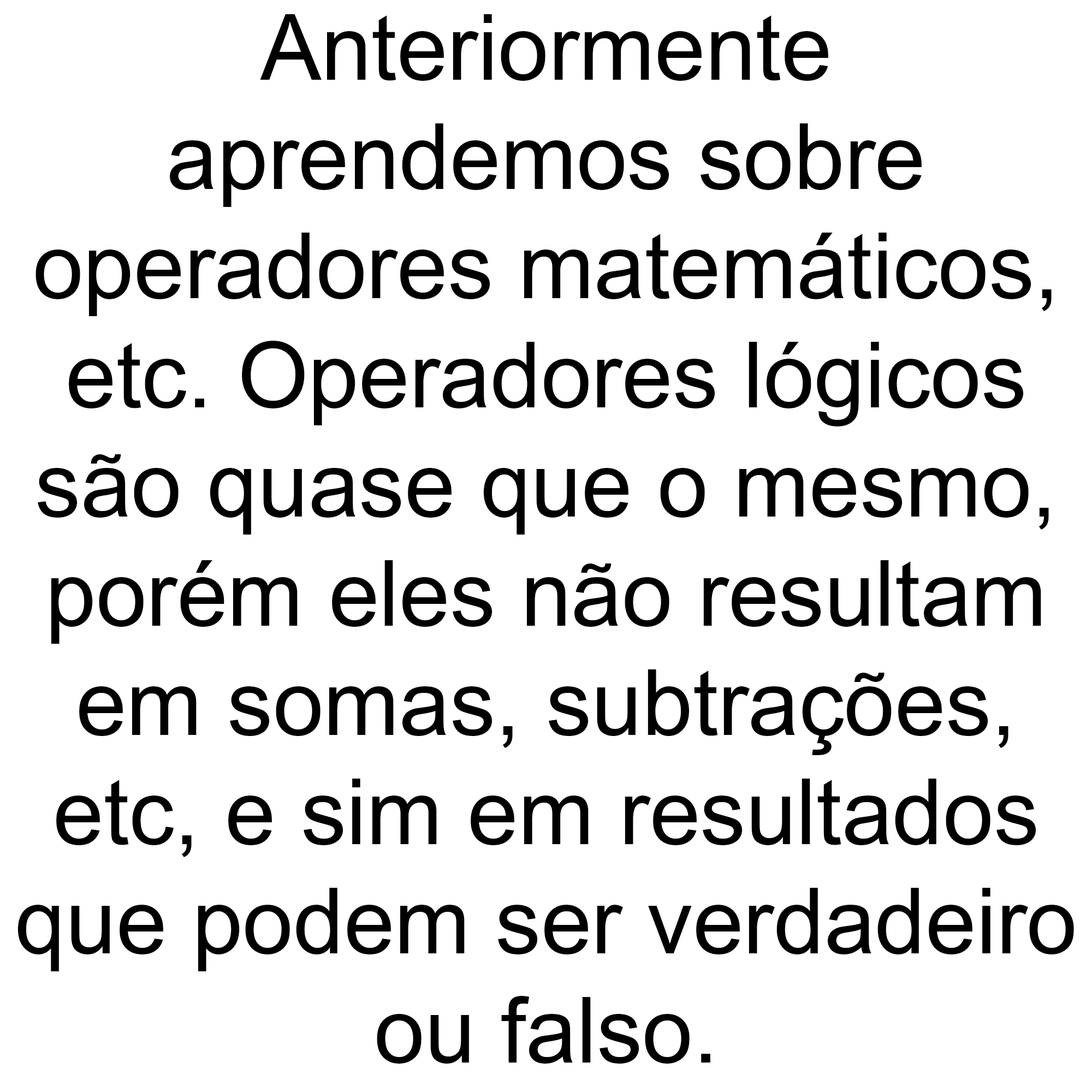
<style>
.page{position:relative;width:1092px;height:1092px;background:#ffffff}
.page>*{position:absolute;margin:0}
.t1{font:91px "ArialMT";color:#000000}
</style>
<div class="page">
<p class="t1" style="left:17px;top:14px;width:1057px;height:1050px;text-align:center">Anteriormente<br>aprendemos sobre<br>operadores matemáticos,<br>etc. Operadores lógicos<br>são quase que o mesmo,<br>porém eles não resultam<br>em somas, subtrações,<br>etc, e sim em resultados<br>que podem ser verdadeiro<br>ou falso.</p>
</div>
